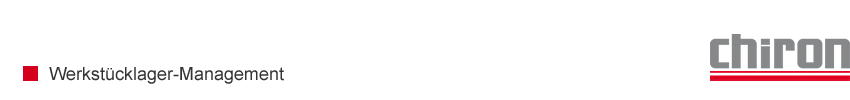
<style>
.page{position:relative;width:850px;height:100px;background:#ffffff}
.page>*{position:absolute;margin:0}
.t1{font:18px "ArialMT";color:#333333}
</style>
<div class="page">
<p class="t1" style="left:49px;top:67px;width:235px;height:17px">Werkstücklager-Management</p>
</div>
